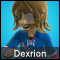
<style>
.page{position:relative;width:60px;height:60px}
.page>*{position:absolute;margin:0}
.t1{font:10px "FranklinGothic-Medium";color:#ffffff}
</style>
<div class="page">
<p class="t1" style="left:14px;top:50px;width:32px;height:7px">Dexrion</p>
</div>
